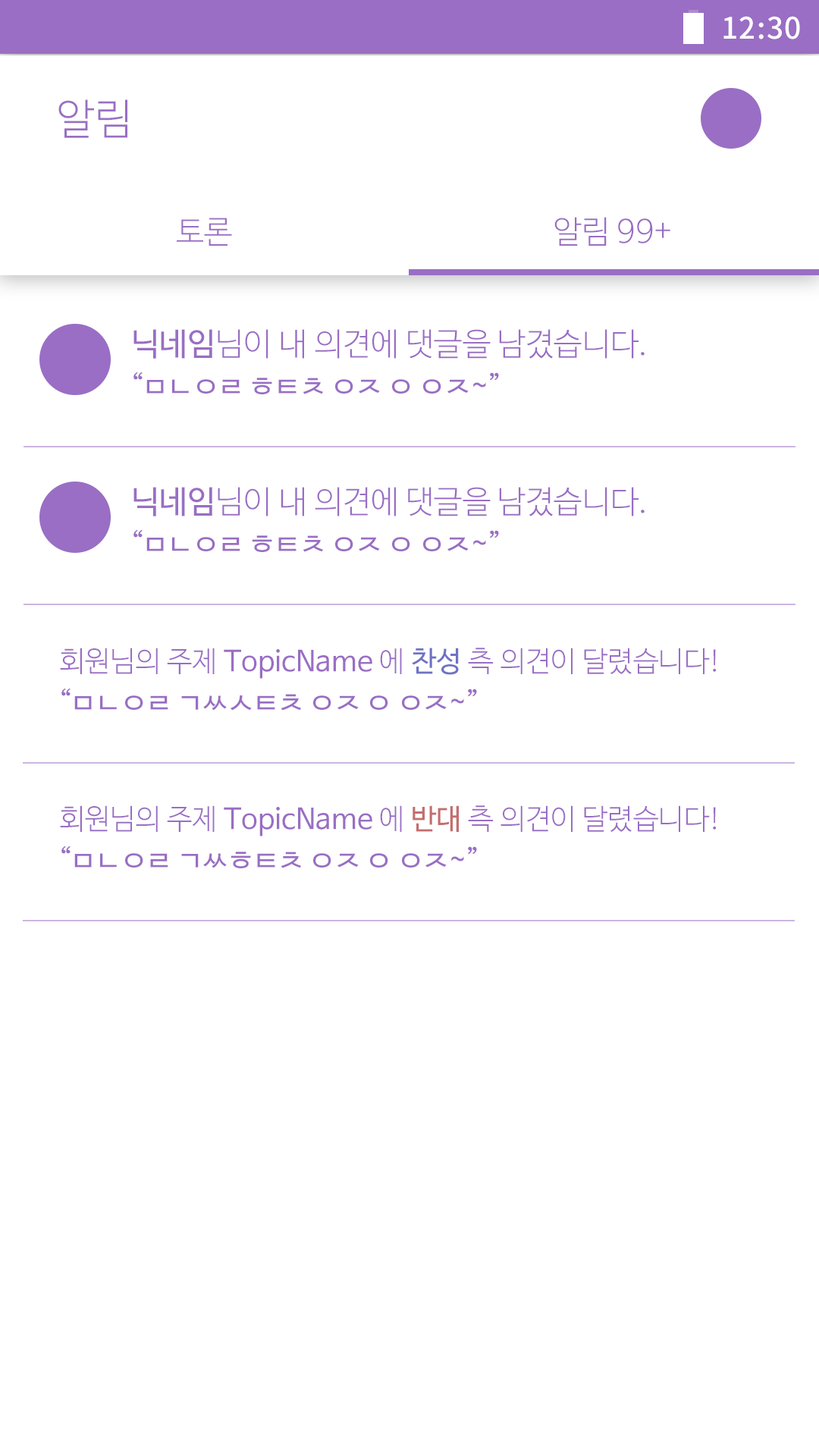
<style>
.page{position:relative;width:819px;height:1456px;background:#ffffff}
.page>*{position:absolute;margin:0}
.t1{font:29.6px "NotoSansCJKkr-Medium";letter-spacing:0.029em;color:#ffffff}
.t2{font:42.3px "NanumBarunGothicLight";color:#996ec4}
.t3{font:31.6px "NanumBarunGothicLight";color:#996ec4}
.t4{font:31.6px "NanumBarunGothic";color:#996ec4}
.t5{font:28.2px "NanumBarunGothic";color:#996ec4}
.t6{font:28.4px "NanumBarunGothicLight";color:#996ec4}
.t7{font:28.4px "NanumBarunGothic";color:#996ec4}
.t8{font:28.4px "NanumBarunGothic";color:#6e72c4}
.t9{font:28.4px "NanumBarunGothic";color:#c46e6e}
</style>
<div class="page">
<p class="t1" style="left:723px;top:16px;width:77px;height:23px">12:30</p>
<p class="t2" style="left:58px;top:99px;width:69px;height:39px">알림</p>
<p class="t3" style="left:177px;top:218px;width:55px;height:28px">토론</p>
<p class="t3" style="left:554px;top:217px;width:116px;height:29px">알림 99+</p>
<p class="t3" style="left:133px;top:329px;width:512px;height:30px"><span class="t4">닉네임</span>님이 내 의견에 댓글을 남겼습니다.</p>
<p class="t5" style="left:133px;top:372px;width:366px;height:22px">“ㅁㄴㅇㄹ ㅎㅌㅊ ㅇㅈ ㅇ ㅇㅈ~”</p>
<p class="t3" style="left:133px;top:487px;width:512px;height:29px"><span class="t4">닉네임</span>님이 내 의견에 댓글을 남겼습니다.</p>
<p class="t5" style="left:133px;top:529px;width:366px;height:23px">“ㅁㄴㅇㄹ ㅎㅌㅊ ㅇㅈ ㅇ ㅇㅈ~”</p>
<p class="t6" style="left:60px;top:648px;width:657px;height:31px">회원님의 주제 <span class="t7">TopicName</span> 에 <span class="t8">찬성</span> 측 의견이 달렸습니다!</p>
<p class="t5" style="left:61px;top:688px;width:416px;height:23px">“ㅁㄴㅇㄹ ㄱㅆㅅㅌㅊ ㅇㅈ ㅇ ㅇㅈ~”</p>
<p class="t6" style="left:60px;top:805px;width:657px;height:31px">회원님의 주제 <span class="t7">TopicName</span> 에 <span class="t9">반대</span> 측 의견이 달렸습니다!</p>
<p class="t5" style="left:61px;top:846px;width:416px;height:22px">“ㅁㄴㅇㄹ ㄱㅆㅎㅌㅊ ㅇㅈ ㅇ ㅇㅈ~”</p>
</div>
